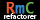
<style>
.page{position:relative;width:40px;height:20px;background:#000000}
.page>*{position:absolute;margin:0}
.t1{font:14.3px "Monaco";color:#ee5c2e;font-weight:bold;scale:1.09 1}
.t2{font:14.3px "Monaco";color:#3387cc;font-weight:bold;scale:1.09 1}
.t3{font:14.3px "Monaco";color:#65b042;font-weight:bold;scale:1.09 1}
.t4{font:8px "MyriadPro-Regular";color:#fefefe}
</style>
<div class="page">
<p class="t1" style="left:6px;top:2px;width:28px;height:12px">R<span class="t2">m</span><span class="t3">C</span></p>
<p class="t4" style="left:4px;top:13px;width:33px;height:6px">refactorer</p>
</div>
